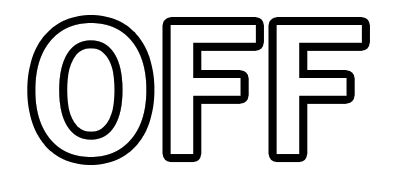
<style>
.page{position:relative;width:398px;height:180px;background:#ffffff}
.page>*{position:absolute;margin:0}
.t1{font:166.7px "YuGothic-Bold";color:#ffffff}
</style>
<div class="page">
<p class="t1" style="left:35px;top:23px;width:327px;height:134px">OFF</p>
</div>
